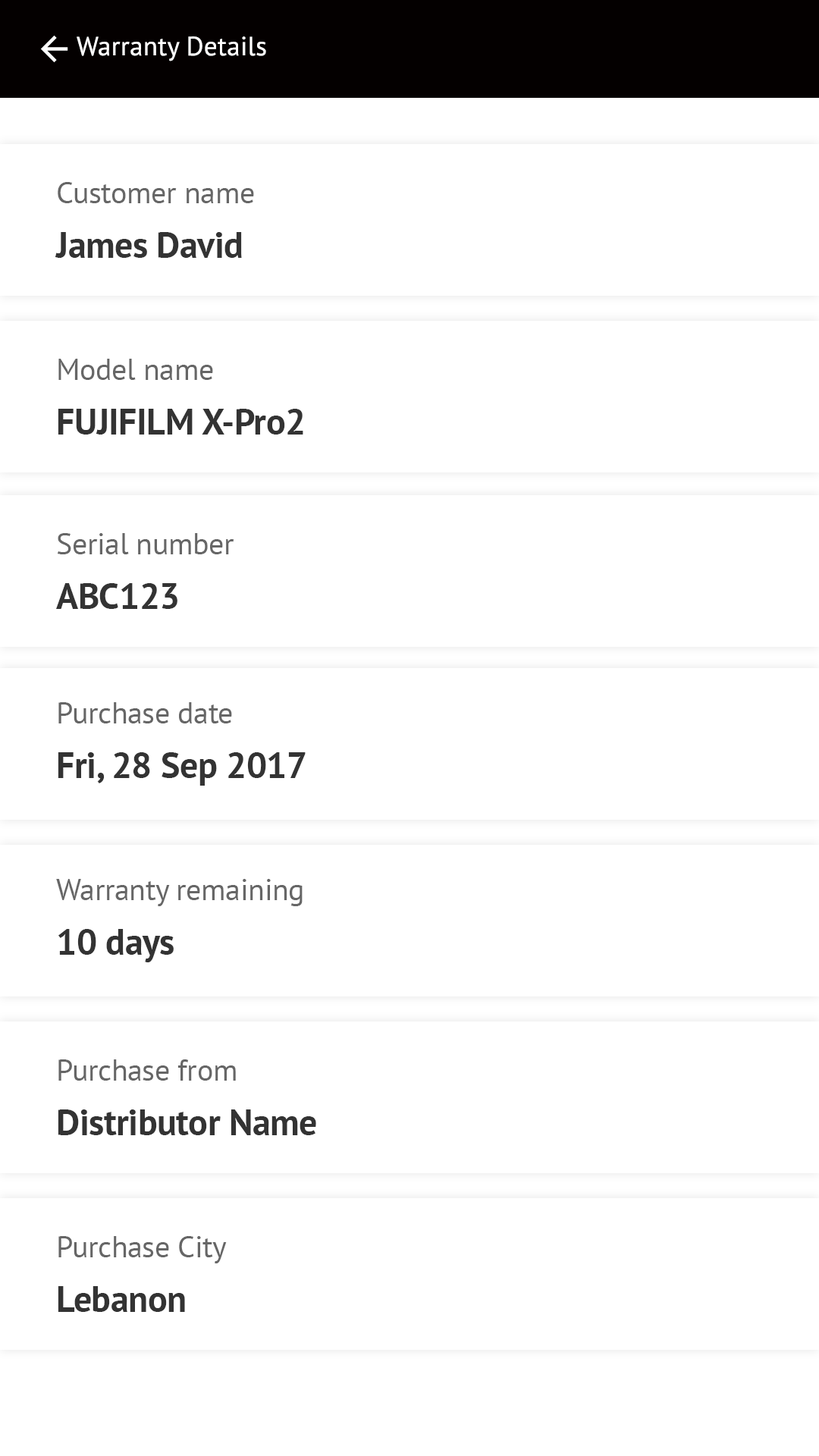
<style>
.page{position:relative;width:819px;height:1456px;background:#ffffff}
.page>*{position:absolute;margin:0}
.t1{font:26.5px "PTSans-Regular";letter-spacing:0.01em;color:#ffffff}
.t2{font:30.3px/54.6px "PTSans-Regular";letter-spacing:-0.01em;color:#666666}
.t3{font:36.4px/54.6px "PTSans-Bold";letter-spacing:-0.01em;color:#333333}
</style>
<div class="page">
<p class="t1" style="left:77px;top:36px;width:189px;height:25px">Warranty Details</p>
<p class="t2" style="left:55px;top:182px;width:199px;height:76px">Customer name<span class="t3"> <br>James David</span></p>
<p class="t3" style="left:58px;top:359px;width:245px;height:76px"><span class="t2">Model name<br></span>FUJIFILM X-Pro2</p>
<p class="t2" style="left:56px;top:533px;width:178px;height:76px">Serial number<br><span class="t3">ABC123</span></p>
<p class="t3" style="left:58px;top:702px;width:248px;height:84px"><span class="t2">Purchase date</span> <br>Fri, 28 Sep 2017</p>
<p class="t2" style="left:56px;top:879px;width:247px;height:83px">Warranty remaining <br><span class="t3">10 days</span></p>
<p class="t3" style="left:58px;top:1059px;width:258px;height:76px"><span class="t2">Purchase from <br></span>Distributor Name</p>
<p class="t2" style="left:58px;top:1236px;width:169px;height:76px">Purchase City <br><span class="t3">Lebanon</span></p>
</div>
